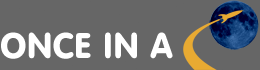
<style>
.page{position:relative;width:260px;height:70px;background:#666666}
.page>*{position:absolute;margin:0}
.t1{font:35px "VAGRoundedBT-Regular";color:#ffffff}
</style>
<div class="page">
<p class="t1" style="left:1px;top:32px;width:172px;height:27px">ONCE IN A</p>
</div>
